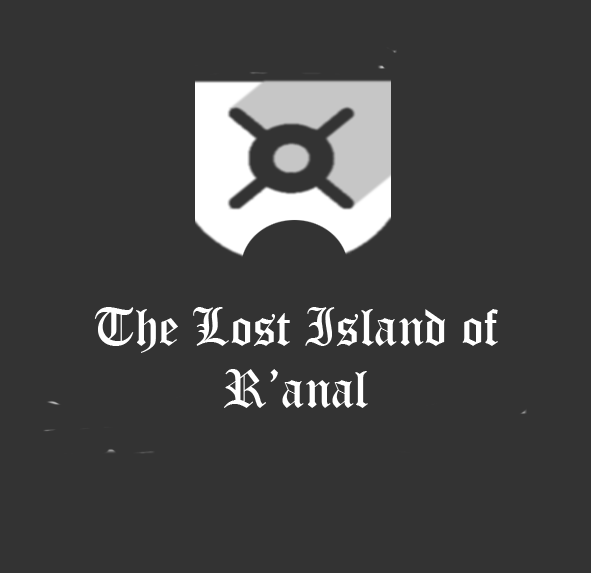
<style>
.page{position:relative;width:591px;height:573px;background:#333333}
.page>*{position:absolute;margin:0}
.t1{font:52px "OldEnglishTextMT";color:#ffffff}
</style>
<div class="page">
<p class="t1" style="left:94px;top:307px;width:404px;height:101px;text-align:center">The Lost Island of<br>R’anal</p>
</div>
